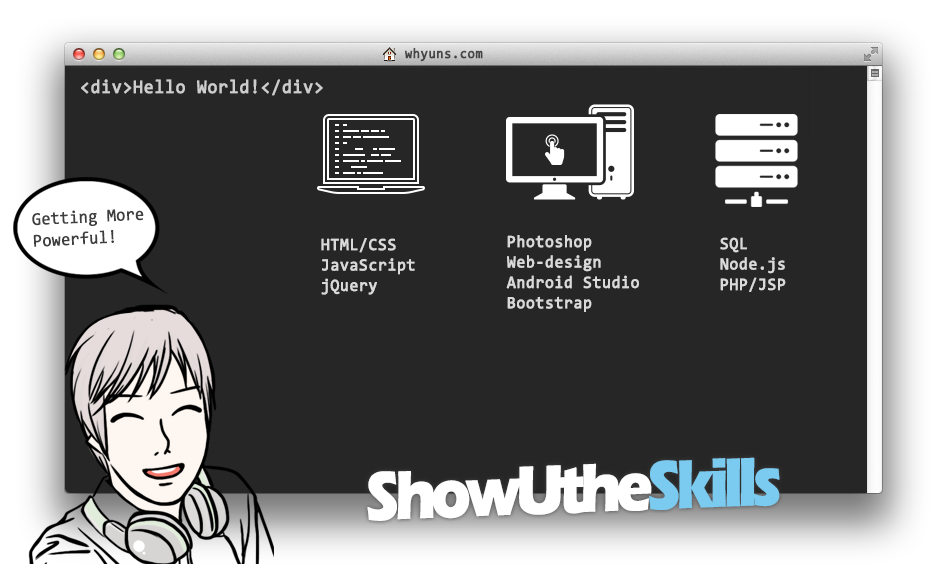
<style>
.page{position:relative;width:931px;height:564px;background:#262626}
.page>*{position:absolute;margin:0}
.t1{font:14px "Consolas";letter-spacing:0.025em;color:#454545;font-weight:bold;scale:0.93 1}
.t2{font:19px "Consolas";letter-spacing:0.025em;color:#cdcdcd;font-weight:bold;scale:0.93 1}
.t3{font:18px "Consolas";color:#3e3e3e;font-weight:bold;scale:0.9 1}
.t4{font:17px "Consolas";letter-spacing:0.025em;color:#dadada;font-weight:bold;scale:0.93 1}
.t5{font:70px "ErasITC-Bold";letter-spacing:-0.1em;color:#ffffff;font-weight:bold;scale:0.86 1}
.t6{font:70px "ErasITC-Bold";letter-spacing:-0.1em;color:#7bcaef;font-weight:bold;scale:0.86 1}
</style>
<div class="page">
<p class="t1" style="left:405px;top:48px;width:78px;height:14px">whyuns.com</p>
<p class="t2" style="left:81px;top:79px;width:242px;height:17px">&lt;div&gt;Hello World!&lt;/div&gt;</p>
<p class="t3" style="left:32px;top:209px;width:112px;height:38px;rotate:-3deg">Getting More<br>Powerful!</p>
<p class="t4" style="left:321px;top:238px;width:94px;height:57px">HTML/CSS<br>JavaScript<br>jQuery</p>
<p class="t4" style="left:506px;top:235px;width:133px;height:77px">Photoshop<br>Web-design<br>Android Studio<br>Bootstrap</p>
<p class="t4" style="left:720px;top:237px;width:66px;height:55px">SQL<br>Node.js<br>PHP/JSP</p>
<p class="t5" style="left:367px;top:457px;width:413px;height:64px;rotate:-2deg">ShowUthe<span class="t6">Skills</span></p>
</div>
